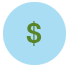
<style>
.page{position:relative;width:69px;height:69px;background:#a8ddf3}
.page>*{position:absolute;margin:0}
.t1{font:29.1px "Helvetica-Bold";color:#598527}
</style>
<div class="page">
<p class="t1" style="left:26px;top:21px;width:16px;height:25px">$</p>
</div>
